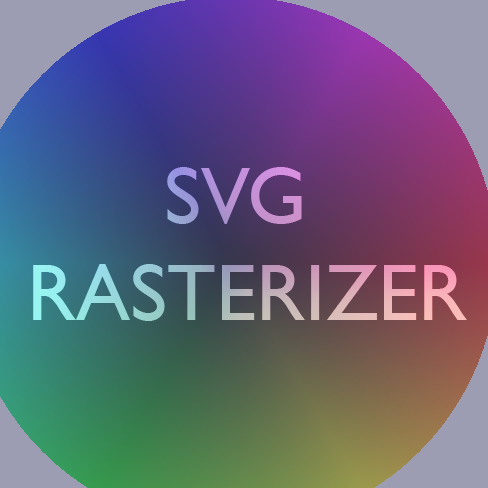
<style>
.page{position:relative;width:488px;height:488px}
.page>*{position:absolute;margin:0}
.t1{font:81.1px "GillSansMT";text-transform:uppercase}
</style>
<div class="page">
<p class="t1" style="left:33px;top:167px;width:434px;height:154px;text-align:center">SVG <br>Rasterizer</p>
<p class="t1" style="left:33px;top:167px;width:434px;height:154px;text-align:center">SVG <br>Rasterizer</p>
</div>
